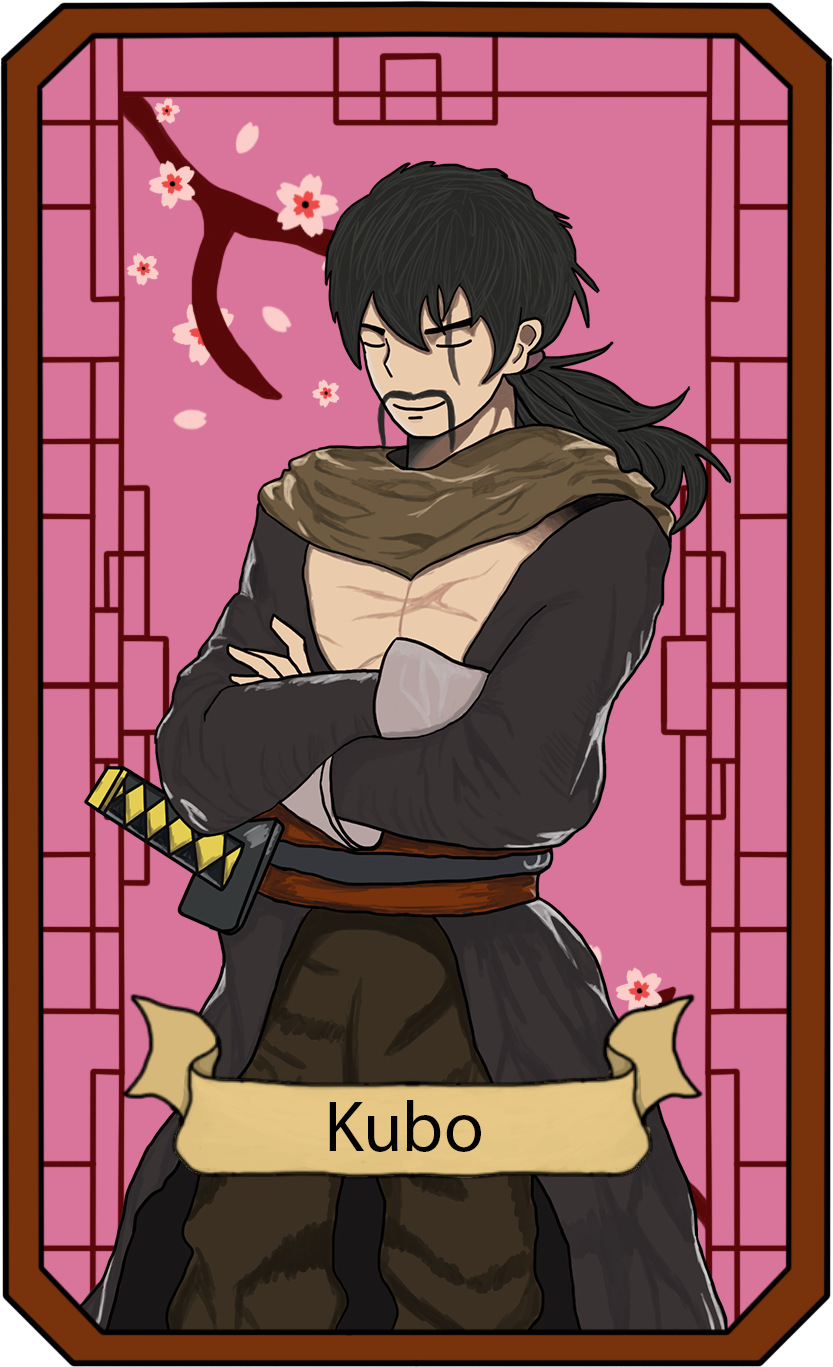
<style>
.page{position:relative;width:833px;height:1367px;background:#d9749a}
.page>*{position:absolute;margin:0}
.t1{font:72.4px "MyriadPro-Regular";color:#000000}
</style>
<div class="page">
<p class="t1" style="left:329px;top:1100px;width:152px;height:52px">Kubo</p>
</div>
